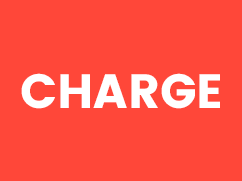
<style>
.page{position:relative;width:242px;height:181px;background:#ff4739}
.page>*{position:absolute;margin:0}
.t1{font:48px "Poppins";color:#ffffff}
</style>
<div class="page">
<p class="t1" style="left:21px;top:73px;width:199px;height:36px">CHARGE</p>
</div>
